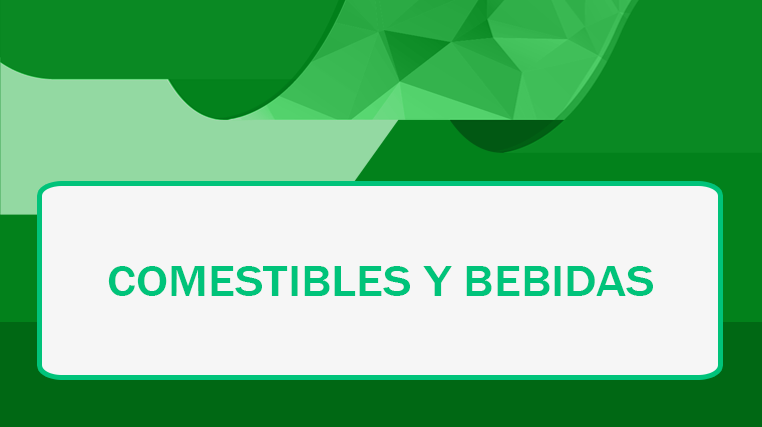
<style>
.page{position:relative;width:762px;height:427px;background:#f6f6f6}
.page>*{position:absolute;margin:0}
.t1{font:44.6px "FranklinGothic-Medium";color:#00c37a;scale:1.12 1}
</style>
<div class="page">
<p class="t1" style="left:108px;top:266px;width:545px;height:30px">COMESTIBLES Y BEBIDAS</p>
</div>
